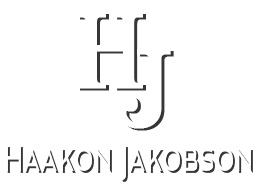
<style>
.page{position:relative;width:256px;height:196px;background:#ffffff}
.page>*{position:absolute;margin:0}
.t1{font:104px "Century";letter-spacing:0.025em;color:#ffffff;font-weight:bold;scale:0.82 1}
.t2{font:44.9px "AvianoSansRegular";letter-spacing:0.075em;scale:0.5 1}
</style>
<div class="page">
<p class="t1" style="left:80px;top:14px;width:66px;height:77px">H</p>
<p class="t2" style="left:7px;top:147px;width:246px;height:35px">Haakon Jakobson</p>
</div>
